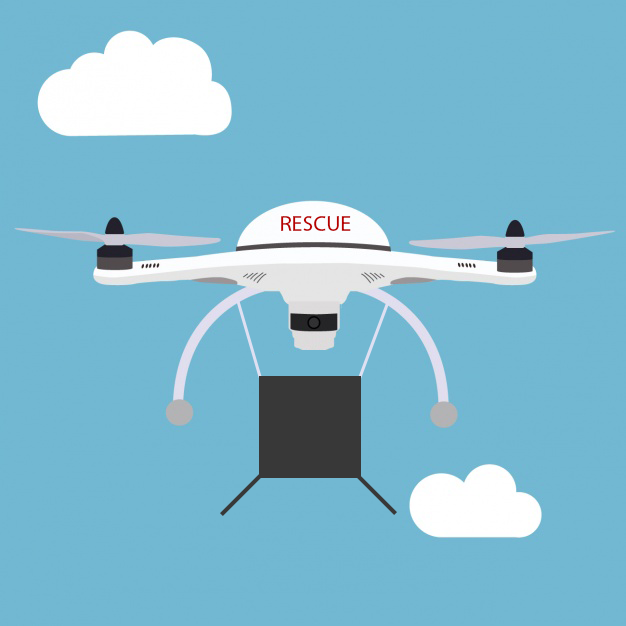
<style>
.page{position:relative;width:626px;height:626px;background:#72b8d2}
.page>*{position:absolute;margin:0}
.t1{font:22px "MyriadPro-Regular";color:#b80000}
</style>
<div class="page">
<p class="t1" style="left:281px;top:216px;width:70px;height:15px">RESCUE</p>
</div>
